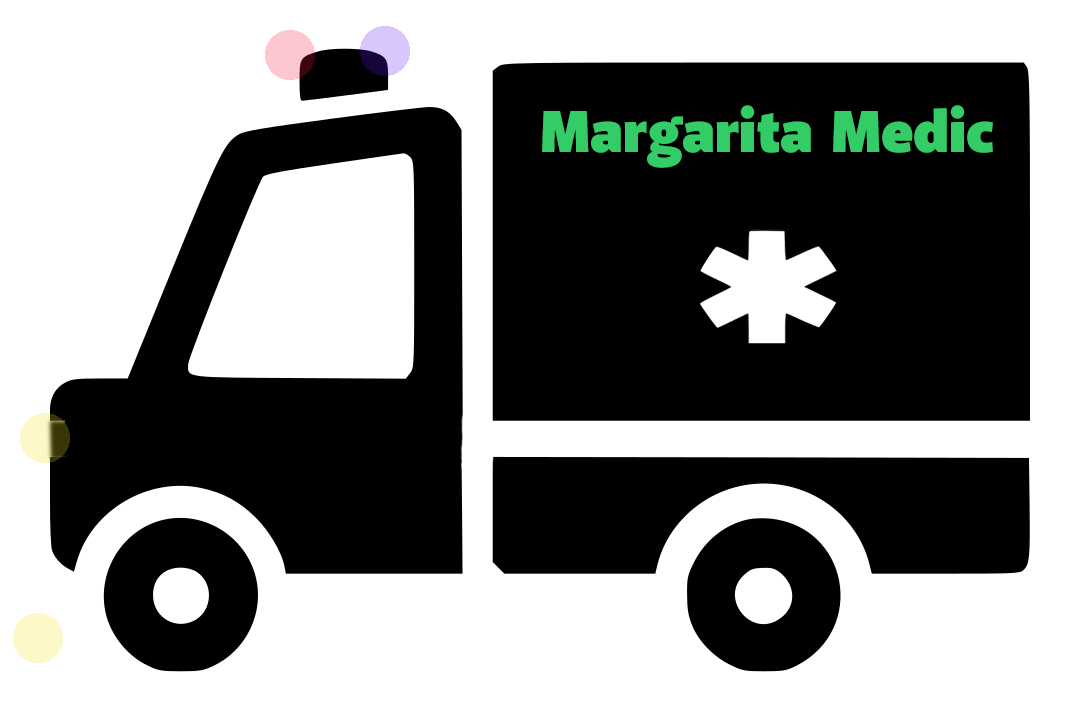
<style>
.page{position:relative;width:1080px;height:720px;background:#ffffff}
.page>*{position:absolute;margin:0}
.t1{font:60px "AkagiPro-Fat";color:#33cc66}
</style>
<div class="page">
<p class="t1" style="left:542px;top:105px;width:451px;height:63px">Margarita Medic</p>
</div>
